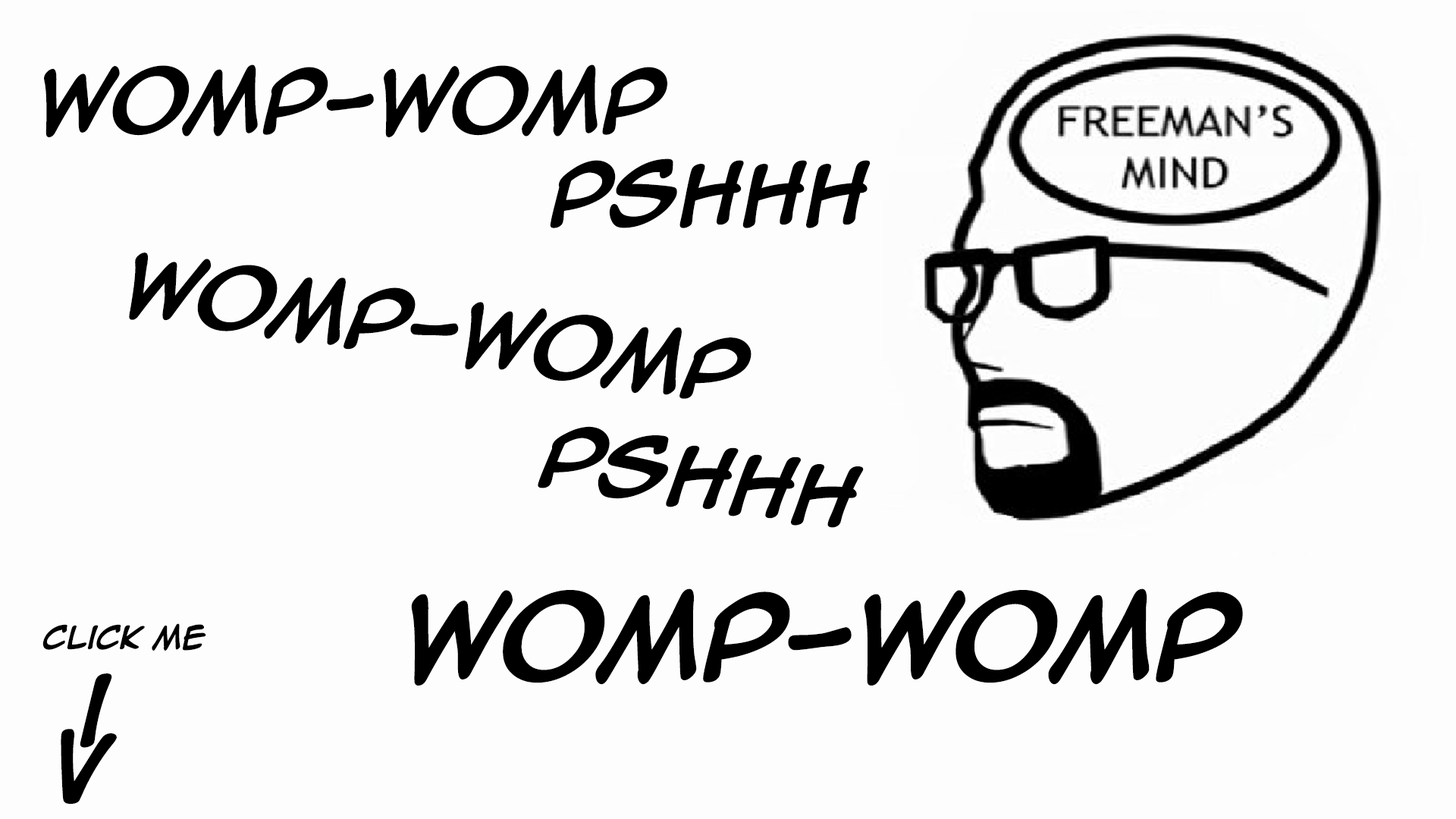
<style>
.page{position:relative;width:1456px;height:819px;background:#fdfdfd}
.page>*{position:absolute;margin:0}
.t1{font:71.9px "AnimeAce2.0BB-Bold";letter-spacing:-0.02em;color:#000000}
.t2{font:95.9px "AnimeAce2.0BB-Bold";letter-spacing:-0.02em;color:#000000}
.t3{font:27px "AnimeAce2.0BB-Bold";letter-spacing:-0.02em;color:#000000}
.t4{font:82.5px "AnimeAce2.0BB-Bold";letter-spacing:-0.02em;color:#000000}
</style>
<div class="page">
<p class="t1" style="left:44px;top:64px;width:623px;height:73px">womp-womp</p>
<p class="t1" style="left:550px;top:158px;width:321px;height:70px">Pshhh</p>
<p class="t1" style="left:129px;top:253px;width:622px;height:146px;rotate:8deg">womp-womp</p>
<p class="t1" style="left:538px;top:426px;width:326px;height:102px;rotate:8deg">Pshhh</p>
<p class="t2" style="left:411px;top:588px;width:832px;height:98px">womp-womp</p>
<p class="t3" style="left:42px;top:623px;width:164px;height:28px">Click me</p>
<p class="t4" style="left:80px;top:673px;width:32px;height:75px">i</p>
<p class="t4" style="left:61px;top:729px;width:56px;height:75px">V</p>
</div>
